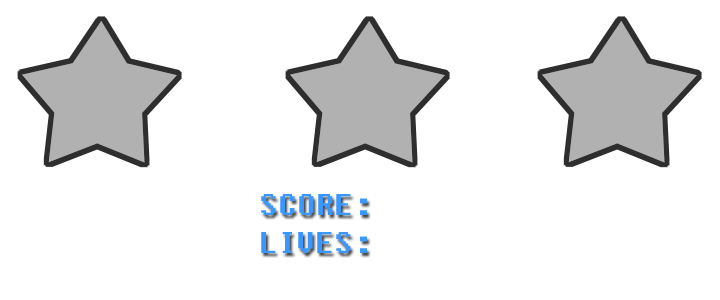
<style>
.page{position:relative;width:720px;height:300px;background:#ffffff}
.page>*{position:absolute;margin:0}
.t1{font:30px "Fixedsys";color:#3b97ff}
</style>
<div class="page">
<p class="t1" style="left:261px;top:194px;width:106px;height:21px">SCORE:</p>
<p class="t1" style="left:261px;top:232px;width:106px;height:21px">LIVES:</p>
</div>
